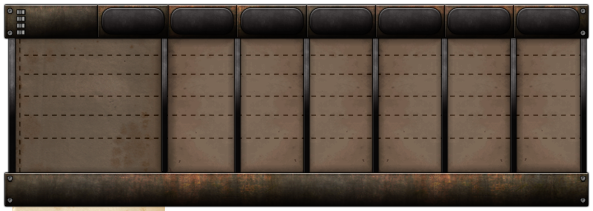
<style>
.page{position:relative;width:593px;height:211px}
.page>*{position:absolute;margin:0}
.t1{font:12px "CaliforniaGothic-Regular"}
.t2{font:12px "CaliforniaGothic-Regular";color:#313131}
.t3{font:12px "CaliforniaGothic-Regular";color:#422c1c}
.t4{font:12px "CaliforniaGothic-Regular";color:#462e1e}
.t5{font:12px "CaliforniaGothic-Regular";color:#432d1c}
</style>
<div class="page">
<p class="t1" style="left:19px;top:10px;width:2px;height:191px;rotate:-90deg">- - - - - - - - - - - - - - - - - - - - -</p>
<p class="t2" style="left:23px;top:54px;width:562px;height:2px">- - - - - - - - - - - - - - - - - - - - - - - - - - - - - - - - - - - - - - - - - - - - - - - - - - - - - - - - - - - - -</p>
<p class="t3" style="left:24px;top:73px;width:561px;height:2px">- - - - - - - - - - - - - - - - - - - - - - - - - - - - - - - - - - - - - - - - - - - - - - - - - - - - - - - - - - - - -</p>
<p class="t2" style="left:24px;top:95px;width:561px;height:2px">- - - - - - - - - - - - - - - - - - - - - - - - - - - - - - - - - - - - - - - - - - - - - - - - - - - - - - - - - - - - -</p>
<p class="t4" style="left:24px;top:114px;width:561px;height:2px">- - - - - - - - - - - - - - - - - - - - - - - - - - - - - - - - - - - - - - - - - - - - - - - - - - - - - - - - - - - - -</p>
<p class="t5" style="left:24px;top:137px;width:561px;height:2px">- - - - - - - - - - - - - - - - - - - - - - - - - - - - - - - - - - - - - - - - - - - - - - - - - - - - - - - - - - - - -</p>
</div>
